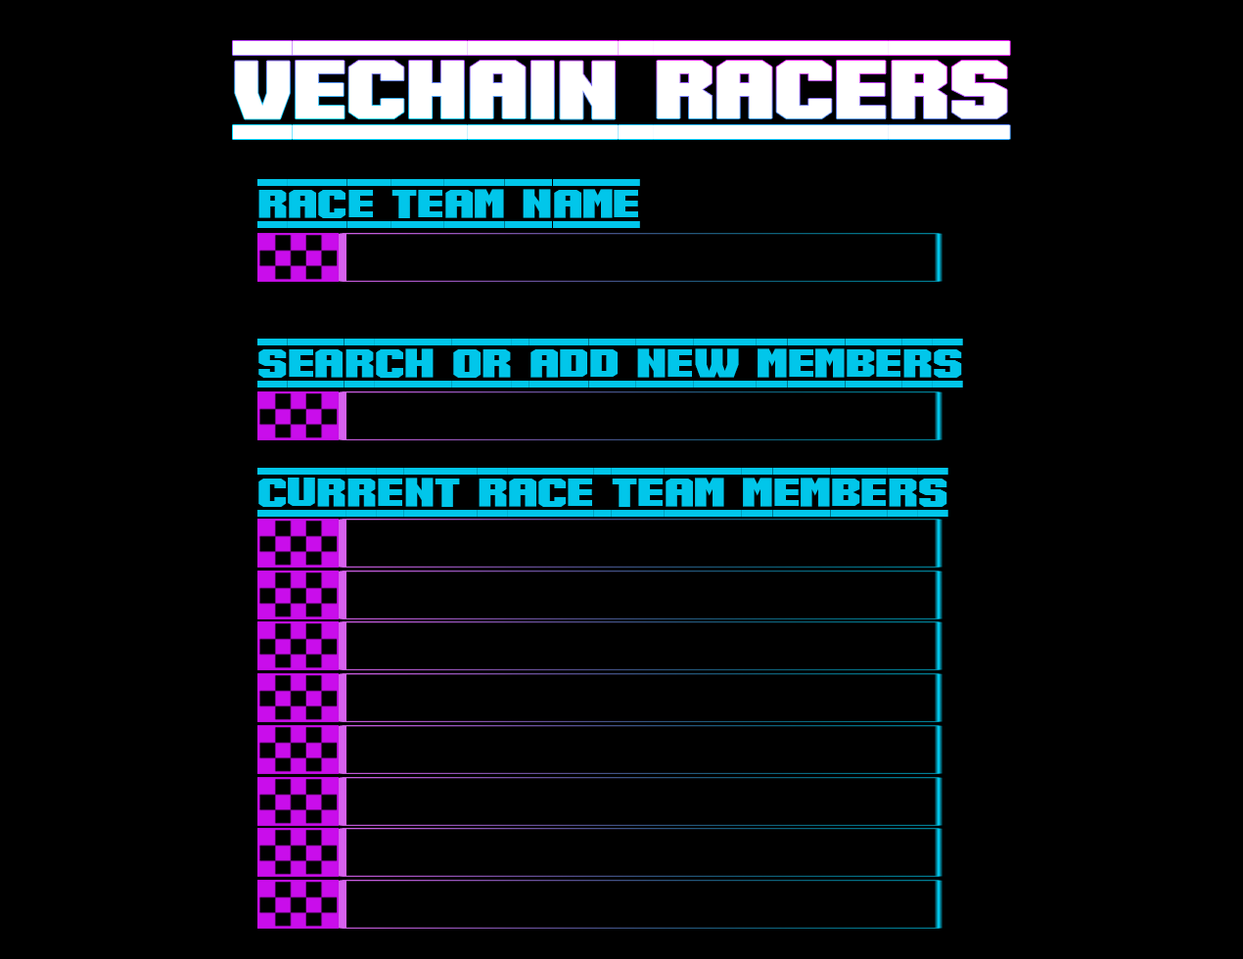
<style>
.page{position:relative;width:1243px;height:959px;background:#000000}
.page>*{position:absolute;margin:0}
.t1{font:141.9px "SpeedRacing-Regular";color:#ffffff}
.t2{font:70.5px "SpeedRacing-Regular";color:#01c6ea}
</style>
<div class="page">
<p class="t1" style="left:233px;top:41px;width:777px;height:98px">VeChain Racers</p>
<p class="t2" style="left:257px;top:179px;width:383px;height:49px">RACE TEAM NAME</p>
<p class="t2" style="left:257px;top:339px;width:706px;height:49px">SEARCH OR ADD NEW MEMBERS</p>
<p class="t2" style="left:257px;top:468px;width:691px;height:49px">CURRENT RACE TEAM MEMBERS</p>
</div>
